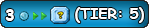
<style>
.page{position:relative;width:149px;height:28px}
.page>*{position:absolute;margin:0}
.t1{font:12px "ComicSansMS-Bold";color:#ffffff}
.t2{font:14.7px "ComicSansMS-Bold";color:#ffffff}
</style>
<div class="page">
<p class="t1" style="left:5px;top:9px;width:9px;height:12px">3</p>
<p class="t2" style="left:75px;top:7px;width:69px;height:16px">(TIER: 5)</p>
</div>
